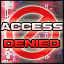
<style>
.page{position:relative;width:64px;height:64px}
.page>*{position:absolute;margin:0}
.t1{font:7px "M42_FLIGHT-721"}
</style>
<div class="page">
<p class="t1" style="left:0px;top:23px;width:63px;height:24px;text-align:center">ACCESS<br><br>DENIED</p>
</div>
